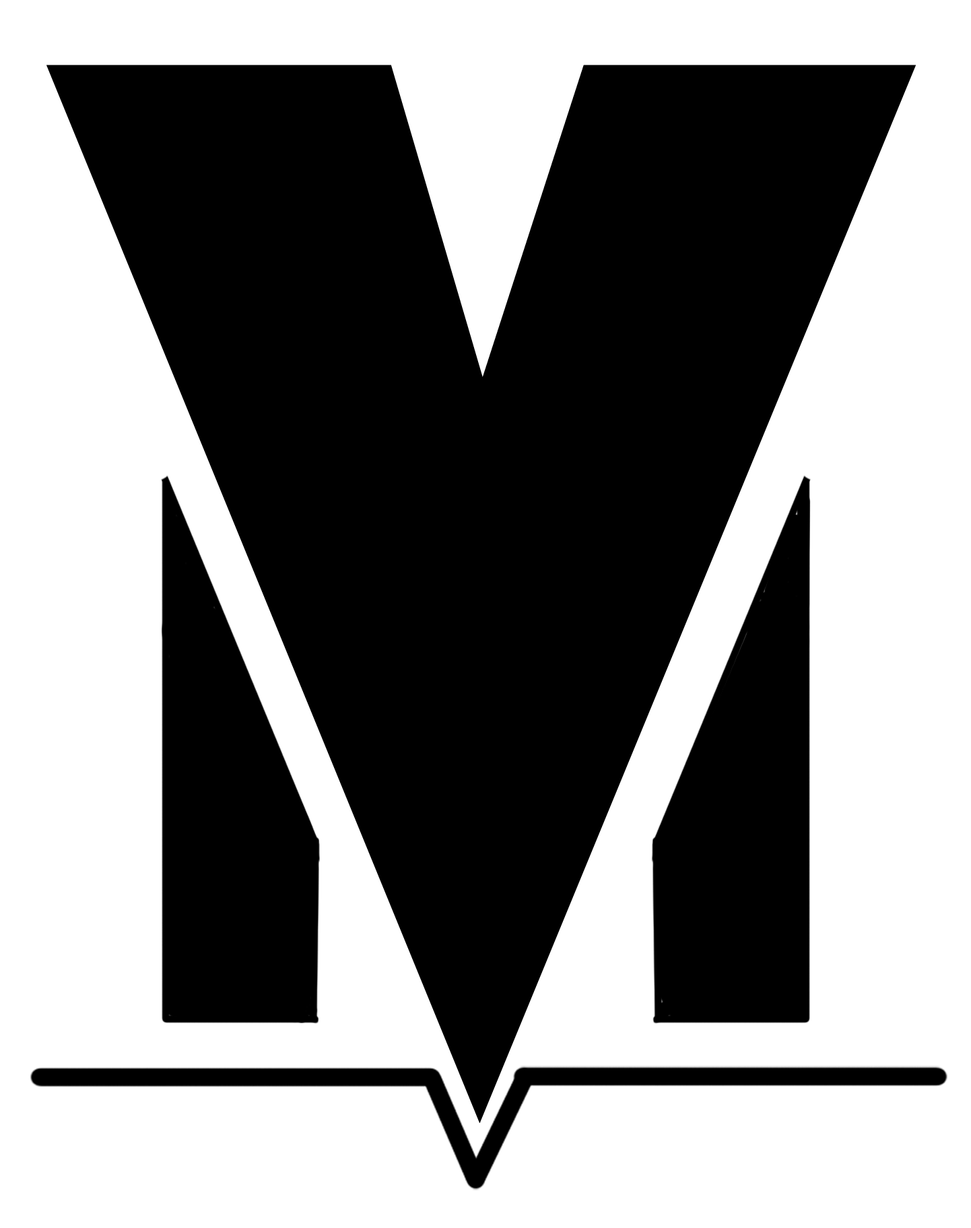
<style>
.page{position:relative;width:971px;height:1228px;background:#ffffff}
.page>*{position:absolute;margin:0}
.t1{font:1501.4px "Bauhaus93";letter-spacing:-0.06em;color:#000000}
</style>
<div class="page">
<p class="t1" style="left:46px;top:65px;width:871px;height:1058px">V</p>
</div>
